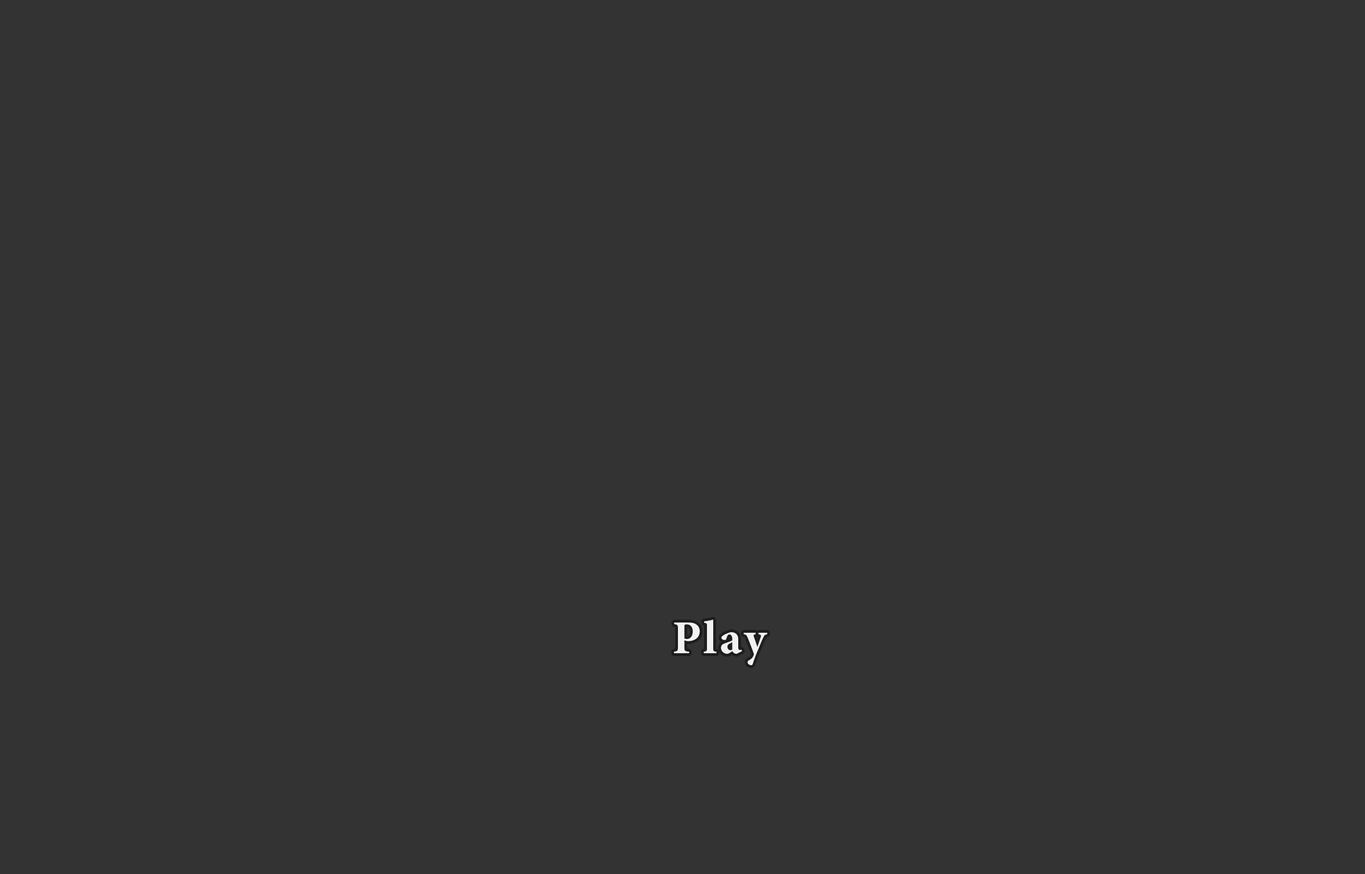
<style>
.page{position:relative;width:1365px;height:874px;background:#333333}
.page>*{position:absolute;margin:0}
.t1{font:47.4px "MinionPro-Bold";letter-spacing:0.05em;color:#f2f2f2}
</style>
<div class="page">
<p class="t1" style="left:674px;top:619px;width:93px;height:46px">Play</p>
</div>
